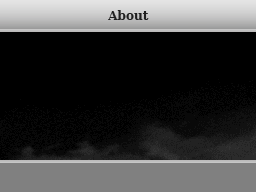
<style>
.page{position:relative;width:256px;height:192px;background:#000000}
.page>*{position:absolute;margin:0}
.t1{font:12px "BitstreamVeraSerif-Bold";color:#202020}
</style>
<div class="page">
<p class="t1" style="left:108px;top:10px;width:41px;height:10px">About</p>
</div>
